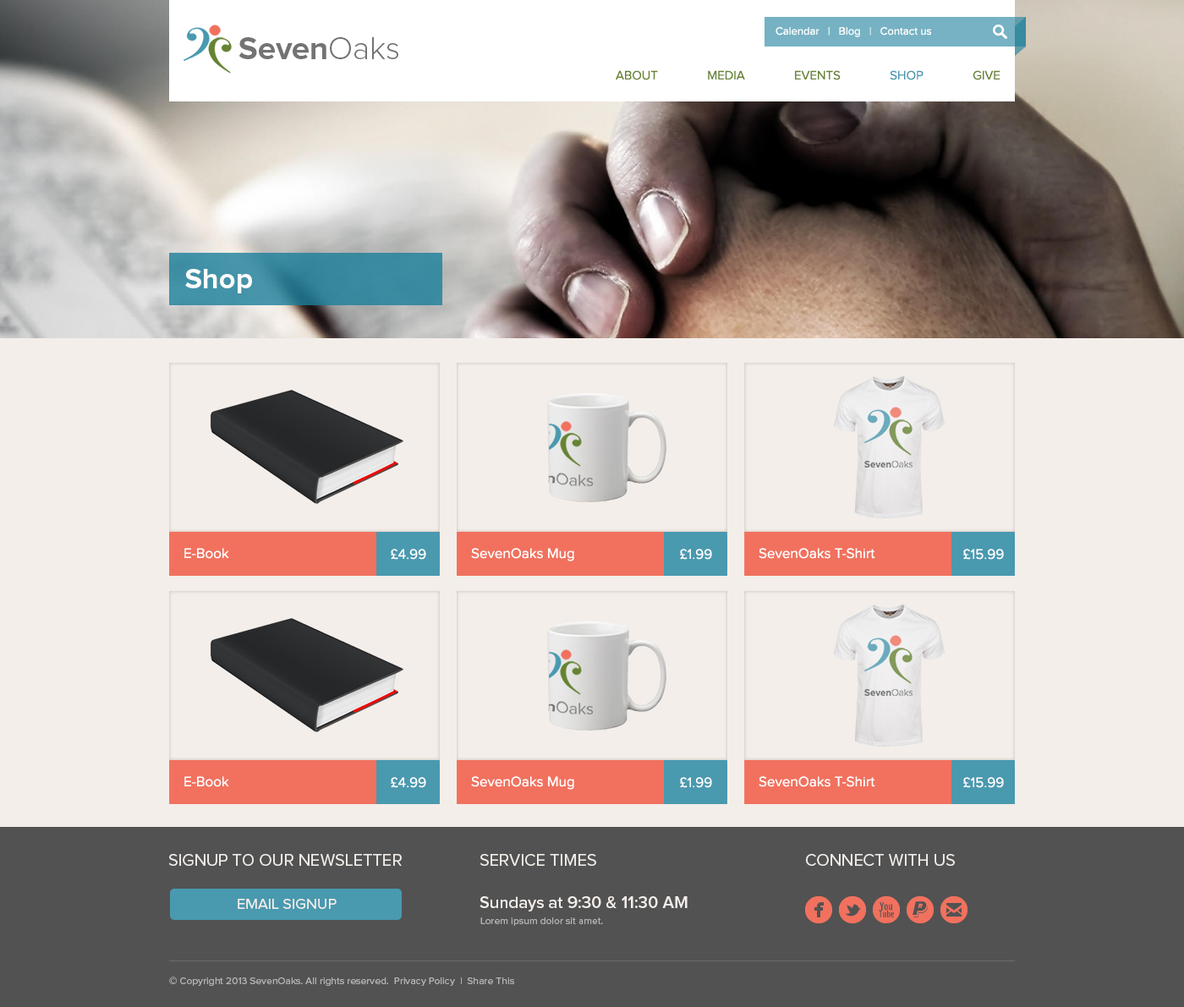
<style>
.page{position:relative;width:1184px;height:1007px;background:#f3eeea}
.page>*{position:absolute;margin:0}
.t1{font:11px "ProximaNova-Regular";color:#ffffff}
.t2{font:31.9px "ProximaNova-Bold";color:#727372}
.t3{font:31.9px "ProximaNova-Light";color:#727372}
.t4{font:12.7px "ProximaNova-Regular";color:#668333}
.t5{font:12.7px "ProximaNova-Regular";color:#4999af}
.t6{font:28.8px "ProximaNova-Bold";color:#ffffff}
.t7{font:14.4px "ProximaNova-Regular";color:#ffffff}
.t8{font:16.9px "ProximaNova-Regular";color:#f3eeea}
.t9{font:15.2px "ProximaNova-Regular";color:#f3eeea}
.t10{font:16.9px "ProximaNova-Semibold";color:#f3eeea}
.t11{font:10.1px "ProximaNova-Regular";color:#b3b3b3}
</style>
<div class="page">
<p class="t1" style="left:775px;top:27px;width:156px;height:10px">Calendar   |   Blog   |   Contact us</p>
<p class="t2" style="left:238px;top:37px;width:160px;height:22px">Seven<span class="t3">Oaks</span></p>
<p class="t4" style="left:616px;top:70px;width:384px;height:10px">ABOUT               MEDIA               EVENTS               <span class="t5">SHOP</span>               GIVE</p>
<p class="t6" style="left:185px;top:269px;width:67px;height:24px">Shop</p>
<p class="t7" style="left:184px;top:548px;width:45px;height:11px">E-Book</p>
<p class="t7" style="left:391px;top:549px;width:35px;height:11px">£4.99</p>
<p class="t7" style="left:471px;top:548px;width:103px;height:14px">SevenOaks Mug</p>
<p class="t7" style="left:680px;top:549px;width:32px;height:11px">£1.99</p>
<p class="t7" style="left:759px;top:548px;width:116px;height:11px">SevenOaks T-Shirt</p>
<p class="t7" style="left:963px;top:549px;width:41px;height:11px">£15.99</p>
<p class="t7" style="left:184px;top:776px;width:45px;height:11px">E-Book</p>
<p class="t7" style="left:391px;top:777px;width:35px;height:11px">£4.99</p>
<p class="t7" style="left:471px;top:776px;width:103px;height:14px">SevenOaks Mug</p>
<p class="t7" style="left:680px;top:777px;width:32px;height:11px">£1.99</p>
<p class="t7" style="left:759px;top:776px;width:116px;height:11px">SevenOaks T-Shirt</p>
<p class="t7" style="left:963px;top:777px;width:41px;height:11px">£15.99</p>
<p class="t8" style="left:168px;top:854px;width:234px;height:12px">SIGNUP TO OUR NEWSLETTER</p>
<p class="t8" style="left:479px;top:854px;width:117px;height:12px">SERVICE TIMES</p>
<p class="t8" style="left:806px;top:854px;width:149px;height:12px">CONNECT WITH US</p>
<p class="t9" style="left:238px;top:899px;width:99px;height:10px">EMAIL SIGNUP</p>
<p class="t10" style="left:479px;top:896px;width:209px;height:16px">Sundays at 9:30 &amp; 11:30 AM</p>
<p class="t11" style="left:480px;top:918px;width:123px;height:8px">Lorem ipsum dolor sit amet.</p>
<p class="t11" style="left:169px;top:977px;width:345px;height:9px">© Copyright 2013 SevenOaks. All rights reserved.  Privacy Policy  |  Share This</p>
</div>
